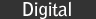
<style>
.page{position:relative;width:96px;height:19px;background:#333333}
.page>*{position:absolute;margin:0}
.t1{font:19px "BellGothicStd-Bold";letter-spacing:-0.025em;color:#ffffff}
</style>
<div class="page">
<p class="t1" style="left:23px;top:1px;width:48px;height:18px">Digital</p>
</div>
